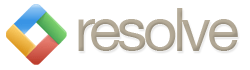
<style>
.page{position:relative;width:250px;height:70px;background:#ffffff}
.page>*{position:absolute;margin:0}
.t1{font:60px "HelveticaNeue";letter-spacing:-0.075em;color:#b2a895}
</style>
<div class="page">
<p class="t1" style="left:78px;top:8px;width:160px;height:43px">resolve</p>
</div>
